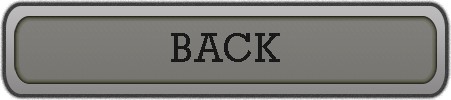
<style>
.page{position:relative;width:451px;height:100px}
.page>*{position:absolute;margin:0}
.t1{font:41.7px "Rockwell";color:#181818}
</style>
<div class="page">
<p class="t1" style="left:171px;top:33px;width:109px;height:29px">BACK</p>
</div>
